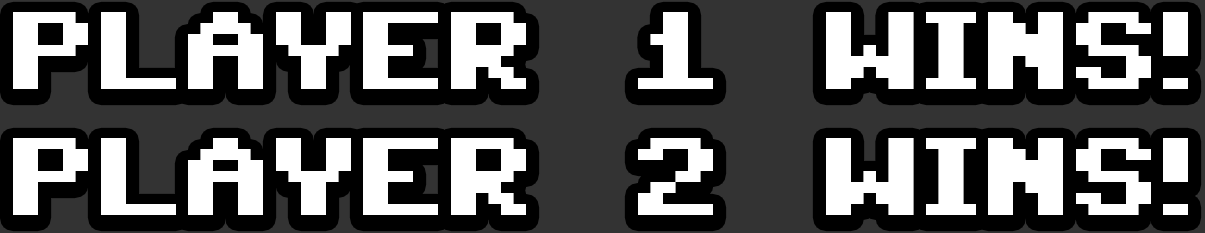
<style>
.page{position:relative;width:1205px;height:233px;background:#000000}
.page>*{position:absolute;margin:0}
.t1{font:88px "C64Pro";color:#ffffff;text-transform:uppercase;scale:1.14 1}
</style>
<div class="page">
<p class="t1" style="left:13px;top:12px;width:1175px;height:77px">Player 1 wins!</p>
<p class="t1" style="left:13px;top:138px;width:1175px;height:77px">Player 2 wins!</p>
</div>
